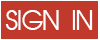
<style>
.page{position:relative;width:100px;height:40px;background:#c0392b}
.page>*{position:absolute;margin:0}
.t1{font:24.6px "AbeatbyKai";color:#ffffff}
</style>
<div class="page">
<p class="t1" style="left:5px;top:10px;width:88px;height:20px">SIGN IN</p>
</div>
